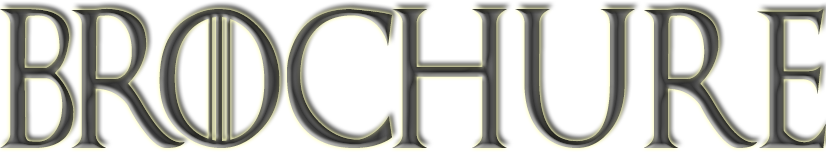
<style>
.page{position:relative;width:826px;height:159px;background:#ffffff}
.page>*{position:absolute;margin:0}
.t1{font:138.7px "GameofThrones";scale:0.86 1}
</style>
<div class="page">
<p class="t1" style="left:0px;top:8px;width:826px;height:140px">Brochure</p>
</div>
